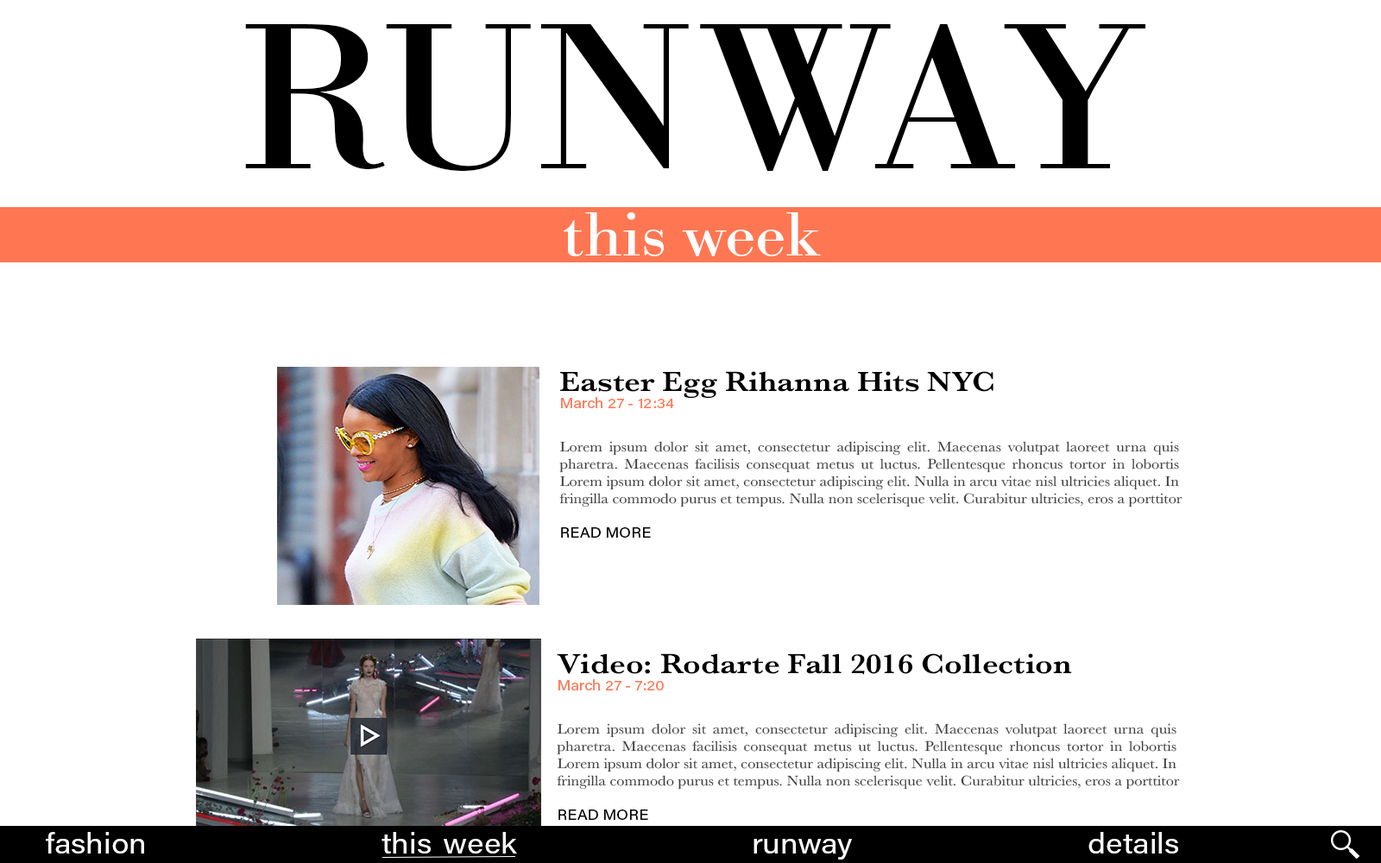
<style>
.page{position:relative;width:1381px;height:863px;background:#ffffff}
.page>*{position:absolute;margin:0}
.t1{font:215.8px "BodoniURW-Reg";color:#000000;scale:1.1 1}
.t2{font:64.7px "BodoniURW-Reg";color:#ffffff;scale:1.1 1}
.t3{font:14.4px "Baskerville";color:#3e3d3d;scale:1.1 1}
.t4{font:28.8px "Baskerville-SemiBold";color:#000000;scale:1.1 1}
.t5{font:14.4px "AcuminPro-Regular";color:#ff7752;scale:1.1 1}
.t6{font:14.4px "AcuminPro-Regular";color:#000000;scale:1.1 1}
.t7{font:28.8px "AcuminPro-Regular";color:#ffffff;scale:1.1 1}
.t8{font:28.8px "AcuminPro-Regular";color:#000000;scale:1.1 1}
</style>
<div class="page">
<p class="t1" style="left:245px;top:24px;width:901px;height:147px">RUNWAY</p>
<p class="t2" style="left:564px;top:212px;width:257px;height:44px">this week</p>
<p class="t3" style="left:559px;top:371px;width:624px;height:167px;text-align:justify"><span class="t4">Easter Egg Rihanna Hits NYC<br></span><span class="t5">March 27 - 12:34 <br><br></span>Lorem ipsum dolor sit amet, consectetur adipiscing elit. Maecenas volutpat laoreet urna quis pharetra. Maecenas facilisis consequat metus ut luctus. Pellentesque rhoncus tortor in lobortis Lorem ipsum dolor sit amet, consectetur adipiscing elit. Nulla in arcu vitae nisl ultricies aliquet. In fringilla commodo purus et tempus. Nulla non scelerisque velit. Curabitur ultricies, eros a porttitor <br><br><span class="t6">READ MORE</span></p>
<p class="t3" style="left:557px;top:654px;width:623px;height:166px;text-align:justify"><span class="t4">Video: Rodarte Fall 2016 Collection<br></span><span class="t5">March 27 - 7:20<br><br></span>Lorem ipsum dolor sit amet, consectetur adipiscing elit. Maecenas volutpat laoreet urna quis pharetra. Maecenas facilisis consequat metus ut luctus. Pellentesque rhoncus tortor in lobortis Lorem ipsum dolor sit amet, consectetur adipiscing elit. Nulla in arcu vitae nisl ultricies aliquet. In fringilla commodo purus et tempus. Nulla non scelerisque velit. Curabitur ultricies, eros a porttitor <br><br><span class="t6">READ MORE</span></p>
<p class="t7" style="left:46px;top:832px;width:1132px;height:28px">fashion this<span class="t8">-</span>week runway details</p>
</div>
